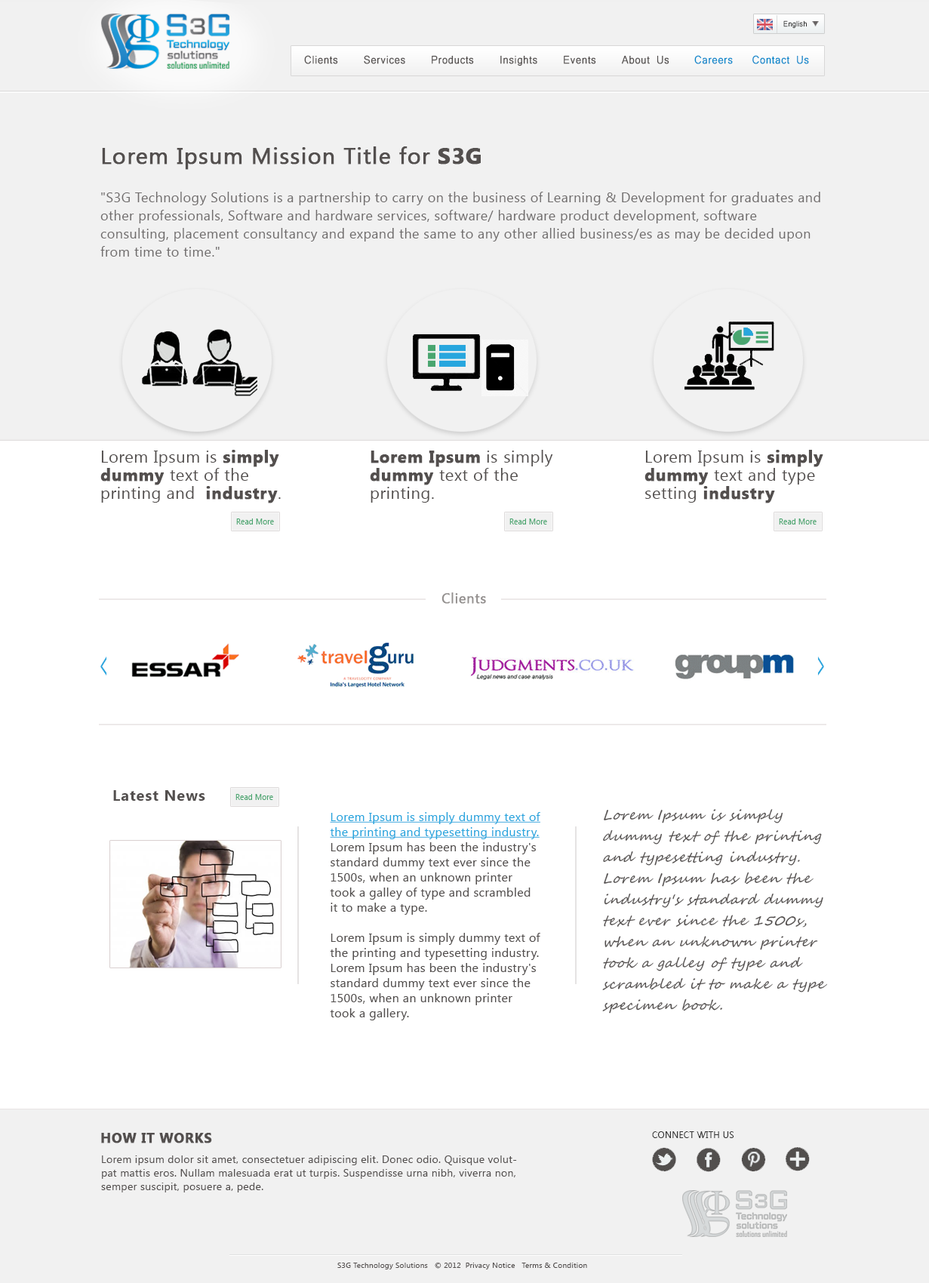
<style>
.page{position:relative;width:929px;height:1283px;background:#ffffff}
.page>*{position:absolute;margin:0}
.t1{font:10px "Microsoft-Yi-Baiti";letter-spacing:0.025em;color:#333333;scale:0.91 1}
.t2{font:14.1px "Microsoft-Yi-Baiti";letter-spacing:0.025em;color:#534f4e;font-weight:bold;scale:0.91 1}
.t3{font:14.1px "Microsoft-Yi-Baiti";letter-spacing:0.025em;color:#0087cb;font-weight:bold;scale:0.91 1}
.t4{font:22.6px "KhmerUI";letter-spacing:0.025em;color:#534f4e;font-weight:bold}
.t5{font:22.6px "KhmerUI-Bold";letter-spacing:0.025em;color:#534f4e;font-weight:bold}
.t6{font:13.6px/18.1px "KhmerUI";letter-spacing:0.025em;color:#6f6c6c}
.t7{font:16.6px/18.1px "KhmerUI";letter-spacing:0.025em;color:#534f4e}
.t8{font:16.6px/18.1px "KhmerUI-Bold";letter-spacing:0.025em;color:#534f4e;font-weight:bold}
.t9{font:8.3px "KhmerUI";letter-spacing:0.025em;color:#49a56f;scale:0.91 1}
.t10{font:13.6px "KhmerUI";letter-spacing:0.025em;color:#94908f;font-weight:bold}
.t11{font:39.4px "KhmerUI";letter-spacing:0.025em;color:#27a6de;scale:0.35 1}
.t12{font:39.6px "KhmerUI";letter-spacing:0.025em;color:#27a6de;scale:0.35 1}
.t13{font:15.1px "KhmerUI-Bold";letter-spacing:0.05em;color:#534f4e}
.t14{font:13.6px/21.1px "SegoeScript";letter-spacing:0.05em;color:#534f4e;font-style:italic}
.t15{font:12.1px/15.1px "KhmerUI";letter-spacing:0.025em;color:#534f4e}
.t16{font:12.1px/15.1px "KhmerUI";letter-spacing:0.025em;color:#27a6de;text-decoration:underline}
.t17{font:13.6px "KhmerUI-Bold";letter-spacing:0.025em;color:#534f4e;font-weight:bold}
.t18{font:9.1px "KhmerUI";letter-spacing:0.025em;color:#333333}
.t19{font:10.6px/13.6px "KhmerUI";letter-spacing:0.025em;color:#534f4e}
.t20{font:7.5px "KhmerUI";letter-spacing:0.025em;color:#534f4e}
</style>
<div class="page">
<p class="t1" style="left:784px;top:20px;width:23px;height:9px">English</p>
<p class="t2" style="left:304px;top:55px;width:366px;height:11px">Clients    Services    Products    Insights    Events    About Us</p>
<p class="t3" style="left:694px;top:55px;width:115px;height:9px">Careers   Contact Us</p>
<p class="t4" style="left:102px;top:146px;width:379px;height:24px">Lorem Ipsum Mission Title for <span class="t5">S3G</span></p>
<p class="t6" style="left:100px;top:192px;width:721px;height:65px">"S3G Technology Solutions is a partnership to carry on the business of Learning &amp; Development for graduates and other professionals, Software and hardware services, software/ hardware product development, software <br>consulting, placement consultancy and expand the same to any other allied business/es as may be decided upon from time to time."</p>
<p class="t7" style="left:100px;top:450px;width:181px;height:53px">Lorem Ipsum is<span class="t8"> simply dummy </span>text of the <br>printing and <span class="t8"> industry</span>.</p>
<p class="t7" style="left:370px;top:450px;width:183px;height:53px"><span class="t8">Lorem Ipsum</span> is simply <span class="t8">dummy </span>text of the printing.</p>
<p class="t7" style="left:645px;top:450px;width:179px;height:53px">Lorem Ipsum is<span class="t8"> simply dummy </span>text and type<br>setting<span class="t8"> industry</span></p>
<p class="t9" style="left:236px;top:519px;width:38px;height:6px">Read More</p>
<p class="t9" style="left:510px;top:519px;width:37px;height:6px">Read More</p>
<p class="t9" style="left:779px;top:519px;width:38px;height:6px">Read More</p>
<p class="t10" style="left:442px;top:593px;width:44px;height:11px">Clients</p>
<p class="t11" style="left:100px;top:657px;width:7px;height:19px">&lt;</p>
<p class="t12" style="left:818px;top:657px;width:6px;height:19px;rotate:180deg">&lt;</p>
<p class="t13" style="left:113px;top:790px;width:92px;height:11px">Latest News</p>
<p class="t9" style="left:236px;top:794px;width:37px;height:6px">Read More</p>
<p class="t14" style="left:602px;top:809px;width:225px;height:205px">Lorem Ipsum is simply dummy text of the printing and typesetting industry. Lorem Ipsum has been the industry's standard dummy text ever since the 1500s, when an unknown printer took a galley of type and scrambled it to make a type specimen book.</p>
<p class="t15" style="left:330px;top:812px;width:210px;height:209px"><span class="t16">Lorem Ipsum is simply dummy text of the printing and typesetting industry. </span>Lorem Ipsum has been the industry's standard dummy text ever since the 1500s, when an unknown printer took a galley of type and scrambled it to make a type.<br><br>Lorem Ipsum is simply dummy text of the printing and typesetting industry. Lorem Ipsum has been the industry's standard dummy text ever since the 1500s, when an unknown printer took a gallery.</p>
<p class="t17" style="left:101px;top:1133px;width:111px;height:11px">HOW IT WORKS</p>
<p class="t18" style="left:652px;top:1132px;width:82px;height:6px">CONNECT WITH US</p>
<p class="t19" style="left:101px;top:1156px;width:416px;height:37px">Lorem ipsum dolor sit amet, consectetuer adipiscing elit. Donec odio. Quisque volutpat mattis eros. Nullam malesuada erat ut turpis. Suspendisse urna nibh, viverra non, semper suscipit, posuere a, pede.</p>
<p class="t20" style="left:337px;top:1262px;width:250px;height:8px">S3G Technology Solutions   © 2012  Privacy Notice   Terms &amp; Condition</p>
</div>
